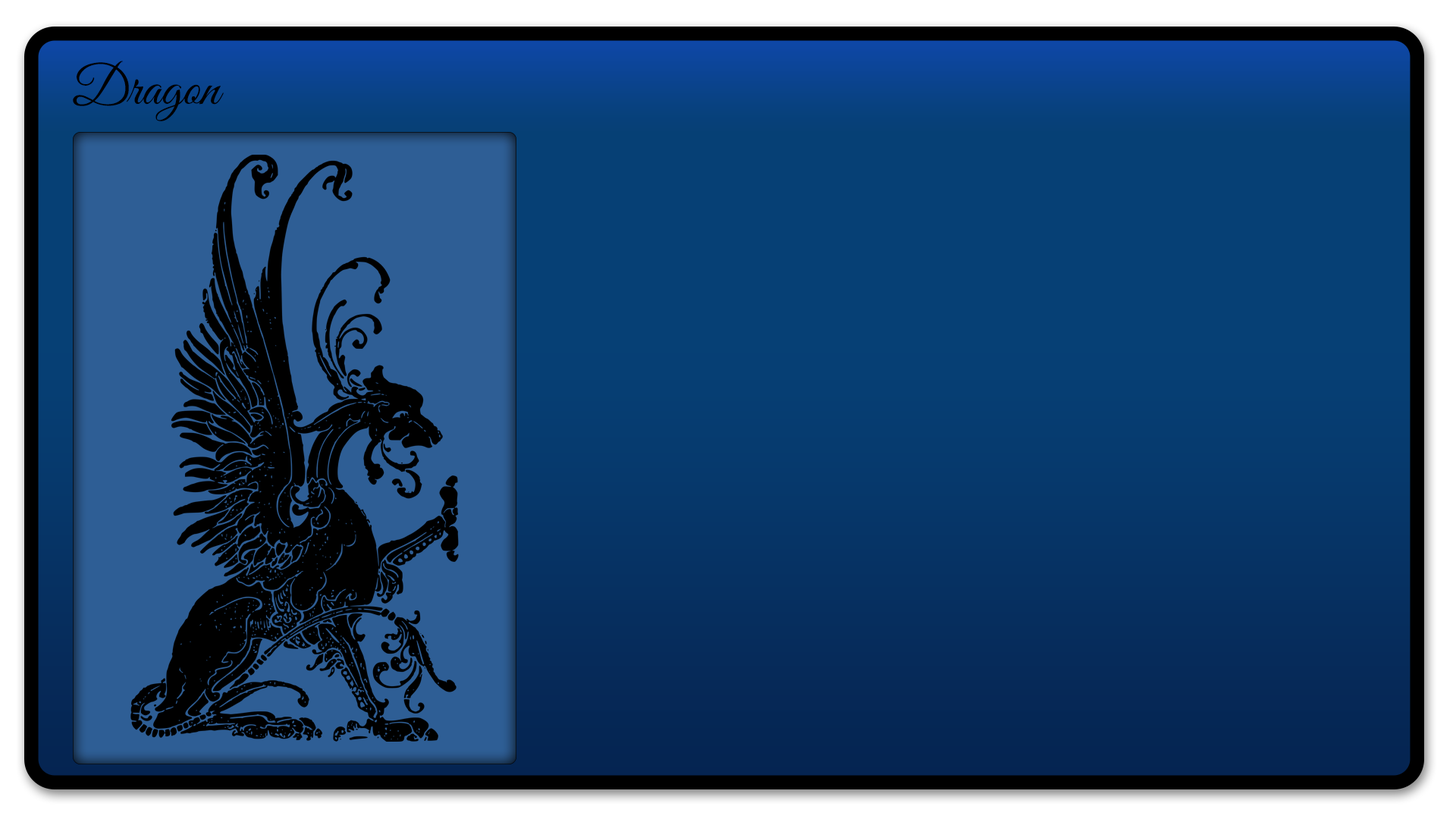
<style>
.page{position:relative;width:1456px;height:819px}
.page>*{position:absolute;margin:0}
.t1{font:54.6px "GreatVibes-Regular";color:#000000}
</style>
<div class="page">
<p class="t1" style="left:73px;top:61px;width:151px;height:60px">Dragon</p>
</div>
